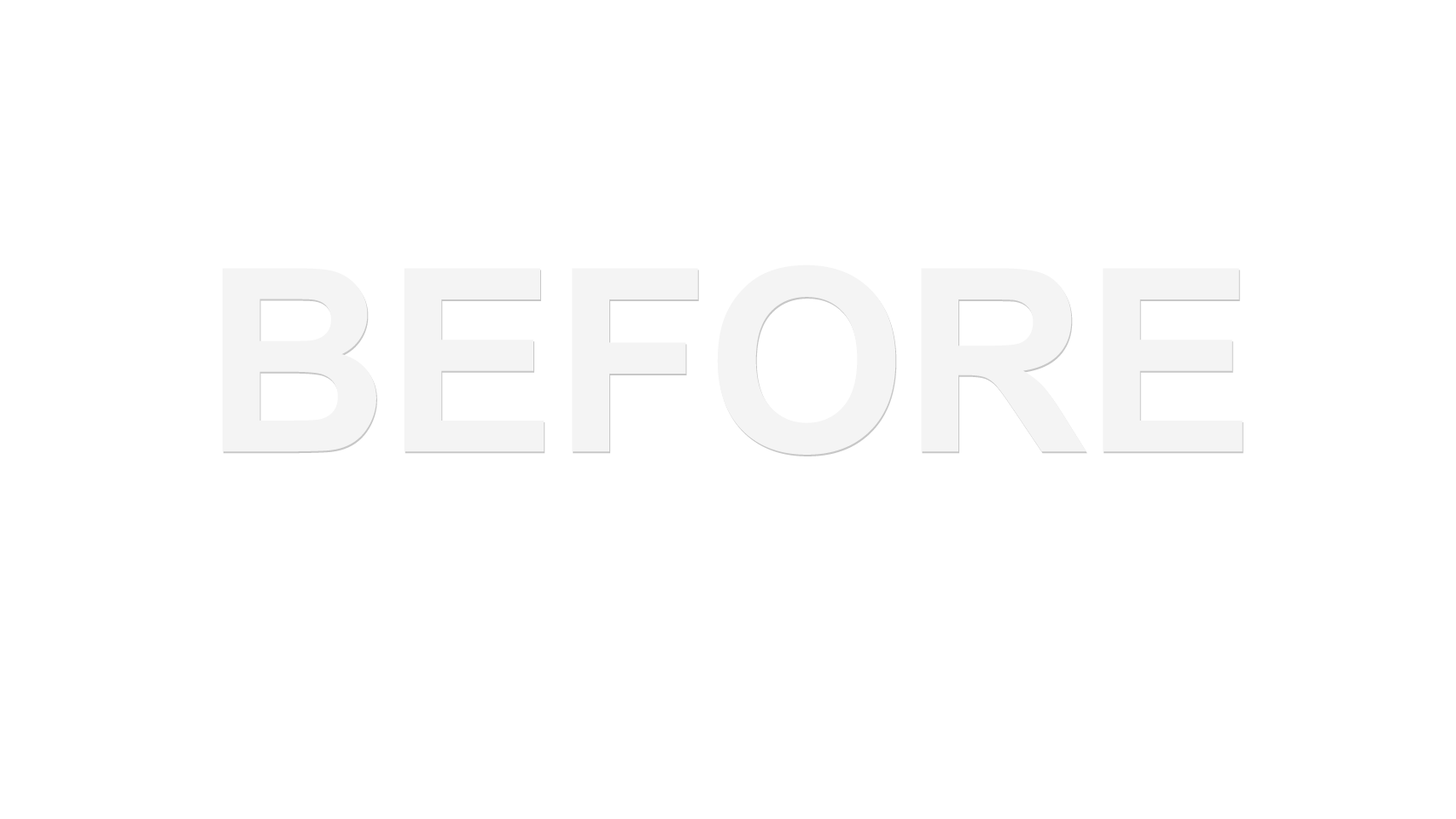
<style>
.page{position:relative;width:1456px;height:819px;background:#ffffff}
.page>*{position:absolute;margin:0}
.t1{font:255.8px "Arial-BoldMT";letter-spacing:-0.012em;color:#f4f4f4;text-transform:uppercase}
</style>
<div class="page">
<p class="t1" style="left:222px;top:265px;width:1020px;height:190px">BEFORE</p>
</div>
